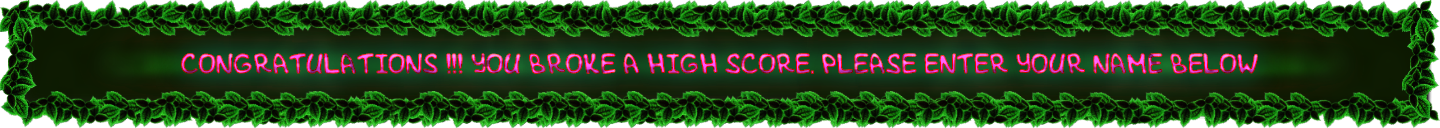
<style>
.page{position:relative;width:1440px;height:128px}
.page>*{position:absolute;margin:0}
.t1{font:30px "Foma_flibustier"}
</style>
<div class="page">
<p class="t1" style="left:181px;top:53px;width:1077px;height:21px">CONGRATULATIONS !!! YOU BROKE A HIGH SCORE. PLEASE ENTER YOUR NAME BELOW</p>
</div>
